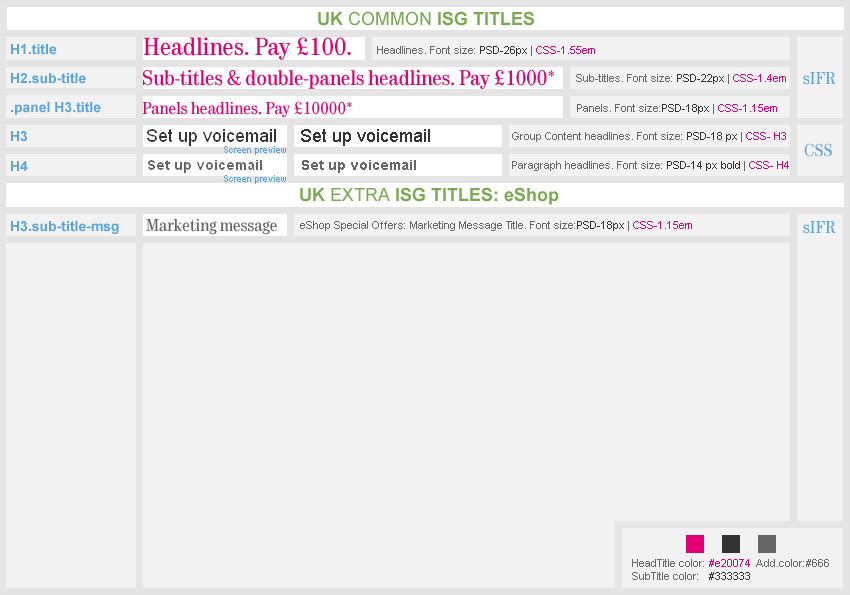
<style>
.page{position:relative;width:850px;height:595px;background:#f2f2f2}
.page>*{position:absolute;margin:0}
.t1{font:18px "Arial-BoldMT";color:#78aa51;text-transform:uppercase}
.t2{font:18px "ArialMT";color:#78aa51;text-transform:uppercase}
.t3{font:26px "Tele-Antiqua";color:#e20074}
.t4{font:14px "Arial-BoldMT";color:#5ca5dc}
.t5{font:11px "ArialMT";color:#666666}
.t6{font:11px "ArialMT";color:#333333}
.t7{font:11px "ArialMT";color:#e20074}
.t8{font:22px "Tele-Antiqua";color:#e20074}
.t9{font:18px "Tele-Antiqua";color:#5ca5dc}
.t10{font:18px "Tele-Antiqua";color:#e20074}
.t11{font:18px "ArialMT";color:#333333}
.t12{font:9px "ArialMT";color:#5ca5dc}
.t13{font:14px "Arial-BoldMT";color:#666666}
.t14{font:18px "Arial-BoldMT";color:#78aa51}
.t15{font:18px "Tele-Antiqua";color:#666666}
</style>
<div class="page">
<p class="t1" style="left:318px;top:11px;width:216px;height:15px">UK <span class="t2">common</span> ISG titles</p>
<p class="t3" style="left:143px;top:37px;width:208px;height:23px">Headlines. Pay £100.</p>
<p class="t4" style="left:11px;top:44px;width:46px;height:11px">H1.title</p>
<p class="t5" style="left:377px;top:46px;width:218px;height:10px">Headlines. Font size: <span class="t6">PSD-26px </span>| <span class="t7">CSS-1.55em</span></p>
<p class="t4" style="left:11px;top:73px;width:75px;height:11px">H2.sub-title</p>
<p class="t8" style="left:143px;top:70px;width:412px;height:19px">Sub-titles &amp; double-panels headlines. Pay £1000*</p>
<p class="t5" style="left:576px;top:74px;width:210px;height:10px">Sub-titles. Font size: <span class="t6">PSD-22px</span> | <span class="t7">CSS-1.4em</span></p>
<p class="t9" style="left:803px;top:72px;width:33px;height:13px">sIFR</p>
<p class="t4" style="left:11px;top:102px;width:90px;height:13px">.panel H3.title</p>
<p class="t10" style="left:142px;top:101px;width:210px;height:17px">Panels headlines. Pay £10000*</p>
<p class="t5" style="left:577px;top:104px;width:200px;height:10px">Panels. Font size:<span class="t6">PSD-18px</span> | <span class="t7">CSS-1.15em</span></p>
<p class="t4" style="left:11px;top:131px;width:16px;height:11px">H3</p>
<p class="t11" style="left:301px;top:129px;width:129px;height:17px">Set up voicemail</p>
<p class="t5" style="left:512px;top:132px;width:274px;height:10px">Group Content headlines. Font size: <span class="t6">PSD-18 px</span> | <span class="t7">CSS- H3</span></p>
<p class="t12" style="left:224px;top:146px;width:62px;height:9px">Screen preview</p>
<p class="t9" style="left:804px;top:143px;width:28px;height:14px">CSS</p>
<p class="t4" style="left:11px;top:161px;width:17px;height:10px">H4</p>
<p class="t13" style="left:302px;top:160px;width:114px;height:13px">Set up voicemail</p>
<p class="t5" style="left:512px;top:161px;width:277px;height:10px">Paragraph headlines. Font size: <span class="t6">PSD-14 px bold</span> | <span class="t7">CSS- H4</span></p>
<p class="t12" style="left:224px;top:175px;width:62px;height:9px">Screen preview</p>
<p class="t1" style="left:300px;top:187px;width:259px;height:18px">UK <span class="t2">extra</span> ISG titles: <span class="t14">eShop</span></p>
<p class="t4" style="left:11px;top:221px;width:108px;height:13px">H3.sub-title-msg</p>
<p class="t15" style="left:146px;top:218px;width:131px;height:17px">Marketing message</p>
<p class="t5" style="left:300px;top:221px;width:392px;height:10px">eShop Special Offers: Marketing Message Title. Font size:<span class="t6">PSD-18px</span> | <span class="t7">CSS-1.15em</span></p>
<p class="t9" style="left:803px;top:221px;width:33px;height:13px">sIFR</p>
<p class="t5" style="left:632px;top:559px;width:197px;height:21px">HeadTitle color: <span class="t7">#e20074 </span> Add.color:#666<br>SubTitle color:   <span class="t6">#333333</span></p>
</div>
